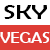
<style>
.page{position:relative;width:50px;height:50px;background:#ffffff}
.page>*{position:absolute;margin:0}
.t1{font:21px "BerlinSansFB-Reg";color:#000000;scale:1.28 1}
.t2{font:15.9px "BerlinSansFB-Reg";color:#ffffff;scale:1.06 1}
</style>
<div class="page">
<p class="t1" style="left:4px;top:5px;width:43px;height:14px">SKY</p>
<p class="t2" style="left:0px;top:32px;width:50px;height:11px">VEGAS</p>
</div>
